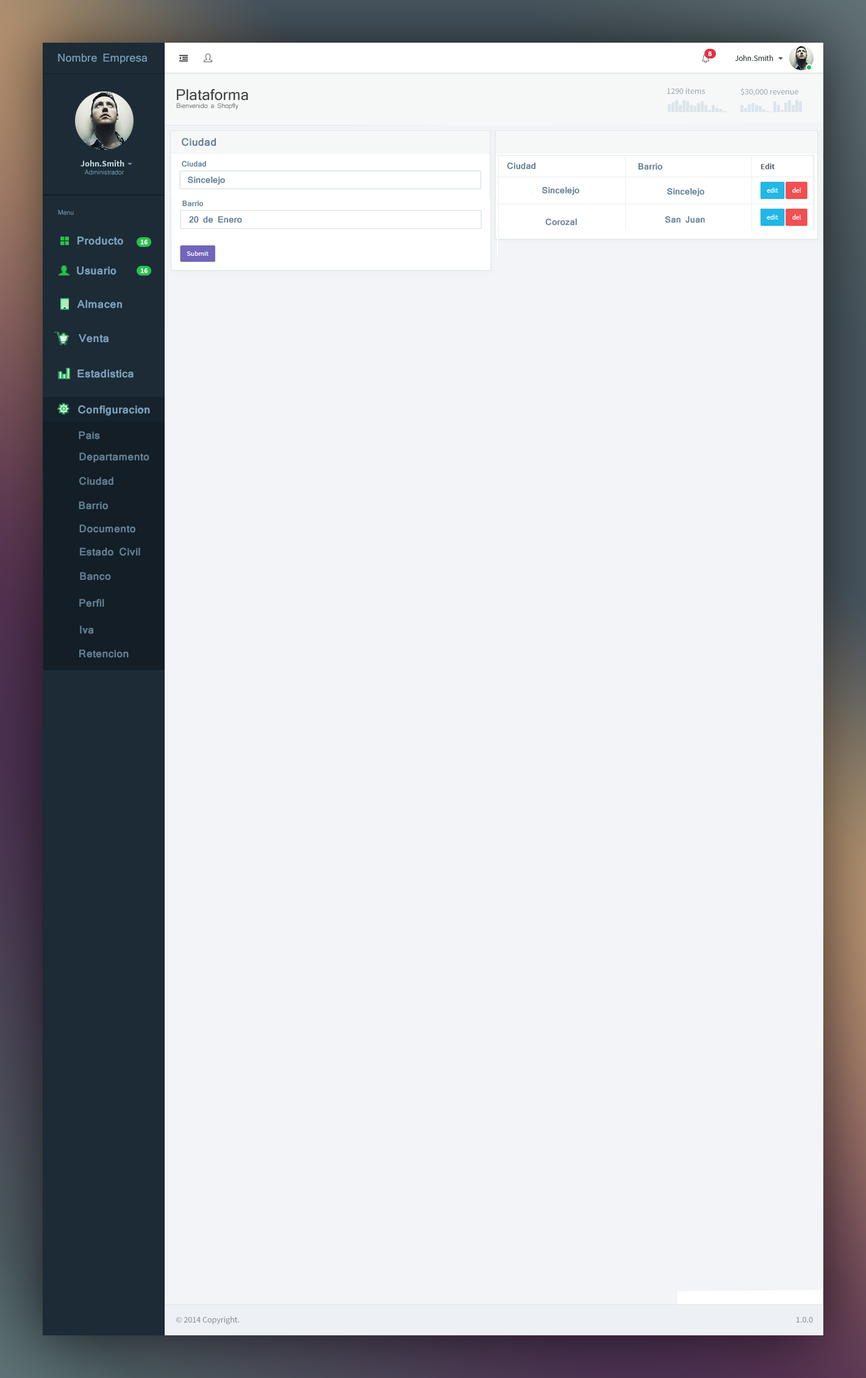
<style>
.page{position:relative;width:866px;height:1378px;background:#f2f4f8}
.page>*{position:absolute;margin:0}
.t1{font:10.7px "Mangal";color:#7ca1bb}
.t2{font:14.6px "Mangal";color:#424344}
.t3{font:6.1px "Mangal"}
.t4{font:10.4px "Mangal-Bold";color:#628095}
.t5{font:7.3px "Mangal-Bold";color:#628095}
.t6{font:6.1px "Mangal";color:#7ca1bb}
.t7{font:8.5px "Mangal-Bold";color:#628095}
.t8{font:10.7px "Mangal-Bold";color:#7ca1bb}
</style>
<div class="page">
<p class="t1" style="left:58px;top:54px;width:89px;height:10px">Nombre Empresa</p>
<p class="t2" style="left:177px;top:89px;width:71px;height:12px">Plataforma</p>
<p class="t3" style="left:176px;top:103px;width:62px;height:7px">Bienvenido a Shopfly</p>
<p class="t4" style="left:182px;top:138px;width:34px;height:8px">Ciudad</p>
<p class="t5" style="left:182px;top:161px;width:24px;height:6px">Ciudad</p>
<p class="t6" style="left:85px;top:169px;width:39px;height:6px">Administrador</p>
<p class="t7" style="left:507px;top:162px;width:28px;height:7px">Ciudad</p>
<p class="t7" style="left:638px;top:163px;width:24px;height:7px">Barrio</p>
<p class="t7" style="left:188px;top:176px;width:37px;height:9px">Sincelejo</p>
<p class="t7" style="left:542px;top:187px;width:37px;height:8px">Sincelejo</p>
<p class="t7" style="left:667px;top:188px;width:37px;height:8px">Sincelejo</p>
<p class="t6" style="left:58px;top:210px;width:16px;height:5px">Menu</p>
<p class="t5" style="left:182px;top:201px;width:21px;height:6px">Barrio</p>
<p class="t7" style="left:189px;top:216px;width:53px;height:7px">20 de Enero</p>
<p class="t7" style="left:545px;top:218px;width:32px;height:8px">Corozal</p>
<p class="t7" style="left:664px;top:216px;width:41px;height:7px">San Juan</p>
<p class="t8" style="left:77px;top:237px;width:46px;height:8px">Producto</p>
<p class="t8" style="left:77px;top:266px;width:39px;height:9px">Usuario</p>
<p class="t8" style="left:77px;top:300px;width:45px;height:8px">Almacen</p>
<p class="t8" style="left:79px;top:334px;width:30px;height:9px">Venta</p>
<p class="t8" style="left:77px;top:369px;width:56px;height:9px">Estadistica</p>
<p class="t8" style="left:78px;top:405px;width:72px;height:11px">Configuracion</p>
<p class="t4" style="left:79px;top:431px;width:21px;height:8px">Pais</p>
<p class="t4" style="left:79px;top:452px;width:70px;height:11px">Departamento</p>
<p class="t4" style="left:79px;top:477px;width:34px;height:8px">Ciudad</p>
<p class="t4" style="left:79px;top:501px;width:29px;height:9px">Barrio</p>
<p class="t4" style="left:79px;top:524px;width:56px;height:9px">Documento</p>
<p class="t4" style="left:80px;top:547px;width:60px;height:9px">Estado Civil</p>
<p class="t4" style="left:80px;top:572px;width:31px;height:8px">Banco</p>
<p class="t4" style="left:79px;top:599px;width:25px;height:8px">Perfil</p>
<p class="t4" style="left:80px;top:625px;width:13px;height:9px">Iva</p>
<p class="t4" style="left:79px;top:649px;width:50px;height:9px">Retencion</p>
</div>
